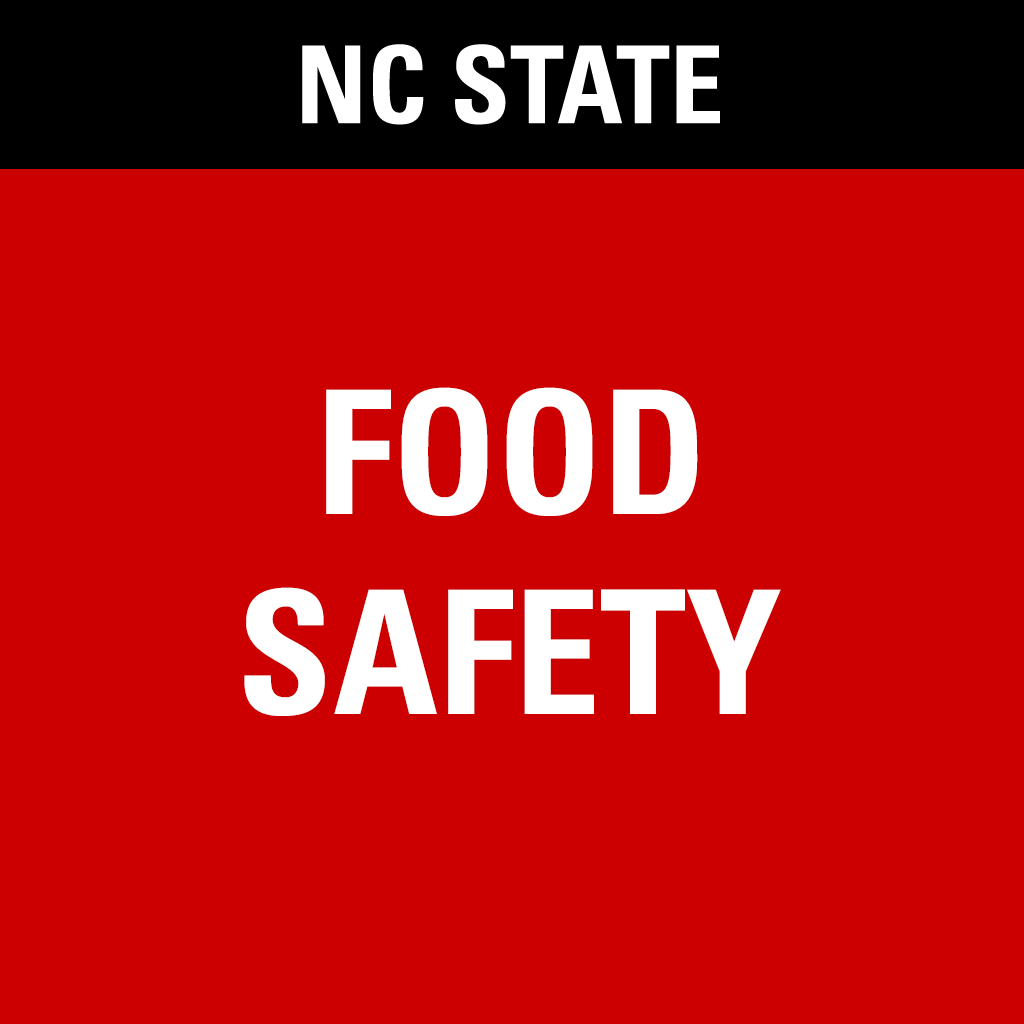
<style>
.page{position:relative;width:1024px;height:1024px;background:#cc0000}
.page>*{position:absolute;margin:0}
.t1{font:172px "Univers-CondensedBold";color:#ffffff}
</style>
<div class="page">
<p class="t1" style="left:326px;top:387px;width:372px;height:129px">FOOD</p>
<p class="t1" style="left:244px;top:587px;width:537px;height:129px">SAFETY</p>
</div>
